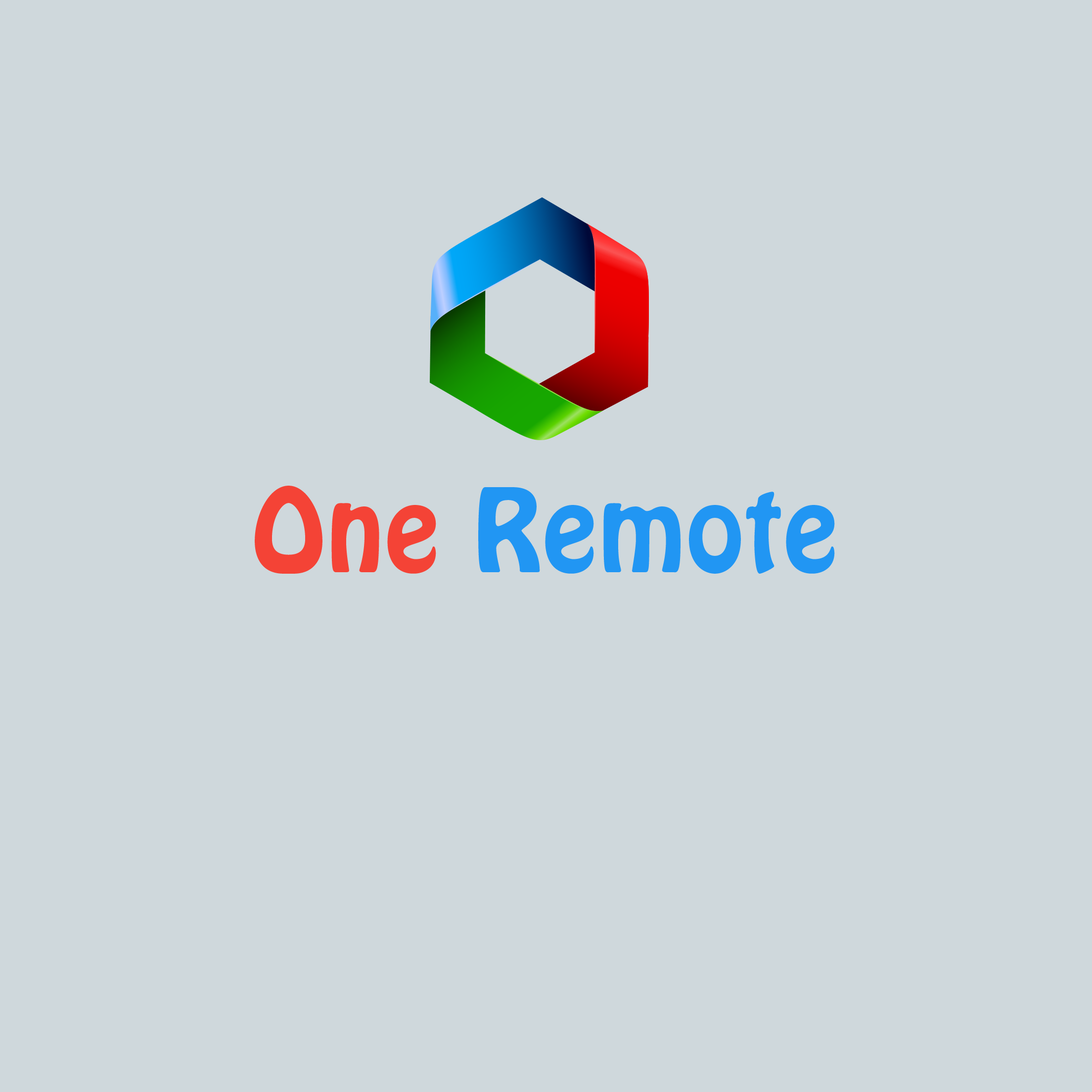
<style>
.page{position:relative;width:1092px;height:1092px;background:#cfd8dc}
.page>*{position:absolute;margin:0}
.t1{font:101.1px "HoboStd";color:#2196f3;font-weight:bold}
.t2{font:101.1px "HoboStd";color:#f44336;font-weight:bold}
</style>
<div class="page">
<p class="t1" style="left:255px;top:486px;width:580px;height:88px"><span class="t2">One </span>Remote</p>
</div>
